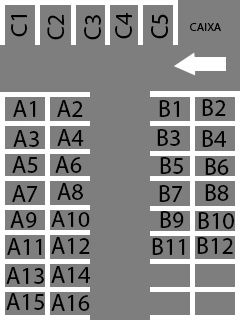
<style>
.page{position:relative;width:240px;height:320px;background:#7e7e7e}
.page>*{position:absolute;margin:0}
.t1{font:23.9px "MyriadPro-Regular";color:#000000}
.t2{font:24px "MyriadPro-Regular";color:#000000}
.t3{font:11.9px "MyriadPro-Regular";color:#000000}
.t4{font:23px "MyriadPro-Regular";color:#000000;scale:1.04 1}
</style>
<div class="page">
<p class="t1" style="left:11px;top:15px;width:16px;height:22px;rotate:-90deg">C1</p>
<p class="t2" style="left:47px;top:14px;width:18px;height:26px;rotate:-91deg">C2</p>
<p class="t2" style="left:84px;top:15px;width:17px;height:25px;rotate:-90deg">C3</p>
<p class="t2" style="left:115px;top:12px;width:17px;height:27px;rotate:-90deg">C4</p>
<p class="t3" style="left:190px;top:23px;width:31px;height:8px">CAIXA</p>
<p class="t2" style="left:13px;top:100px;width:23px;height:17px">A1</p>
<p class="t2" style="left:57px;top:100px;width:26px;height:17px">A2</p>
<p class="t2" style="left:159px;top:100px;width:20px;height:17px">B1</p>
<p class="t2" style="left:202px;top:99px;width:24px;height:17px">B2</p>
<p class="t2" style="left:13px;top:130px;width:26px;height:17px">A3</p>
<p class="t2" style="left:57px;top:129px;width:27px;height:17px">A4</p>
<p class="t2" style="left:157px;top:129px;width:23px;height:17px">B3</p>
<p class="t2" style="left:202px;top:130px;width:25px;height:17px">B4</p>
<p class="t2" style="left:12px;top:156px;width:26px;height:17px">A5</p>
<p class="t2" style="left:55px;top:156px;width:27px;height:17px">A6</p>
<p class="t2" style="left:160px;top:157px;width:23px;height:17px">B5</p>
<p class="t2" style="left:205px;top:158px;width:24px;height:17px">B6</p>
<p class="t2" style="left:12px;top:185px;width:26px;height:17px">A7</p>
<p class="t2" style="left:57px;top:183px;width:26px;height:17px">A8</p>
<p class="t2" style="left:159px;top:185px;width:24px;height:17px">B7</p>
<p class="t2" style="left:205px;top:184px;width:24px;height:17px">B8</p>
<p class="t2" style="left:10px;top:211px;width:27px;height:17px">A9</p>
<p class="t4" style="left:51px;top:211px;width:39px;height:16px">A10</p>
<p class="t2" style="left:160px;top:211px;width:24px;height:17px">B9</p>
<p class="t2" style="left:198px;top:212px;width:36px;height:17px">B10</p>
<p class="t2" style="left:7px;top:238px;width:35px;height:17px">A11</p>
<p class="t2" style="left:51px;top:237px;width:39px;height:17px">A12</p>
<p class="t2" style="left:152px;top:238px;width:33px;height:17px">B11</p>
<p class="t2" style="left:197px;top:237px;width:36px;height:17px">B12</p>
<p class="t2" style="left:6px;top:267px;width:38px;height:17px">A13</p>
<p class="t2" style="left:51px;top:266px;width:40px;height:17px">A14</p>
<p class="t2" style="left:6px;top:293px;width:38px;height:17px">A15</p>
<p class="t2" style="left:51px;top:294px;width:39px;height:17px">A16</p>
</div>
